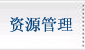
<style>
.page{position:relative;width:85px;height:50px}
.page>*{position:absolute;margin:0}
.t1{font:16px "SimSun";letter-spacing:-0.025em;color:#0c4981;text-transform:uppercase;font-weight:bold}
</style>
<div class="page">
<p class="t1" style="left:10px;top:17px;width:63px;height:15px">资源管理</p>
</div>
